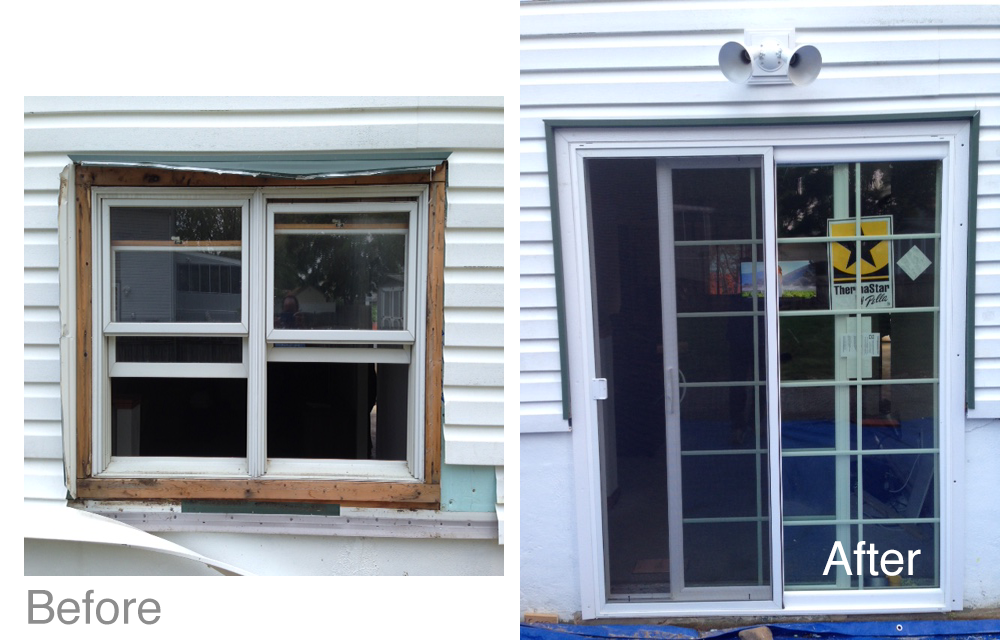
<style>
.page{position:relative;width:1000px;height:640px}
.page>*{position:absolute;margin:0}
.t1{font:46.9px "Helvetica";color:#ffffff}
.t2{font:46.9px "Helvetica";color:#8d8d8d}
</style>
<div class="page">
<p class="t1" style="left:822px;top:541px;width:99px;height:35px">After</p>
<p class="t2" style="left:28px;top:589px;width:133px;height:36px">Before</p>
</div>
